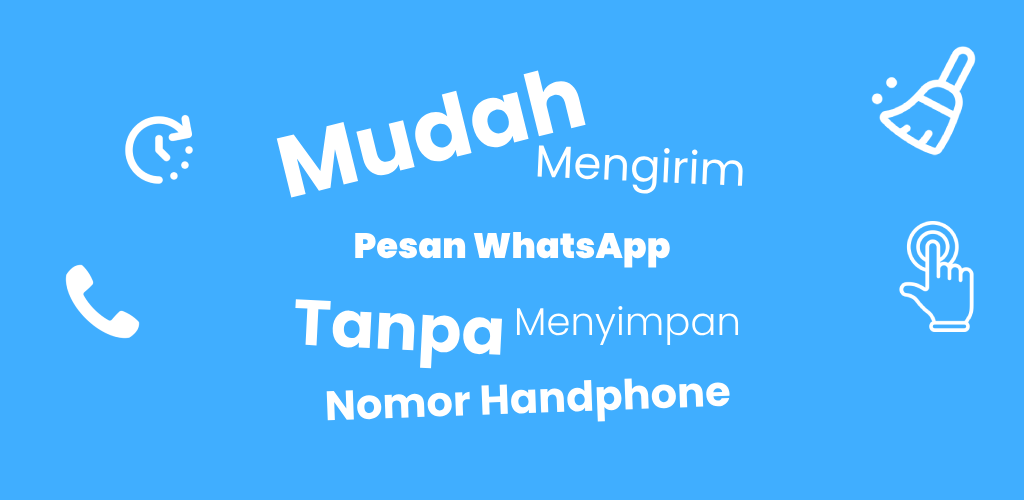
<style>
.page{position:relative;width:1024px;height:500px;background:#40aeff}
.page>*{position:absolute;margin:0}
.t1{font:86.5px "Poppins-Bold";color:#ffffff}
.t2{font:45px "Poppins-Regular";color:#ffffff}
.t3{font:35.2px "Poppins-Black";color:#ffffff}
.t4{font:64.3px "Poppins-Bold";color:#ffffff}
.t5{font:38.6px "Poppins-Light";color:#ffffff}
.t6{font:41.6px "Poppins-Bold";color:#ffffff}
</style>
<div class="page">
<p class="t1" style="left:276px;top:70px;width:310px;height:128px;rotate:-14deg">Mudah</p>
<p class="t2" style="left:537px;top:145px;width:206px;height:49px;rotate:3deg">Mengirim</p>
<p class="t3" style="left:355px;top:231px;width:315px;height:37px">Pesan WhatsApp</p>
<p class="t4" style="left:295px;top:299px;width:207px;height:70px;rotate:3deg">Tanpa</p>
<p class="t5" style="left:516px;top:305px;width:223px;height:40px">Menyimpan</p>
<p class="t6" style="left:326px;top:378px;width:404px;height:44px;rotate:-2deg">Nomor Handphone</p>
</div>
